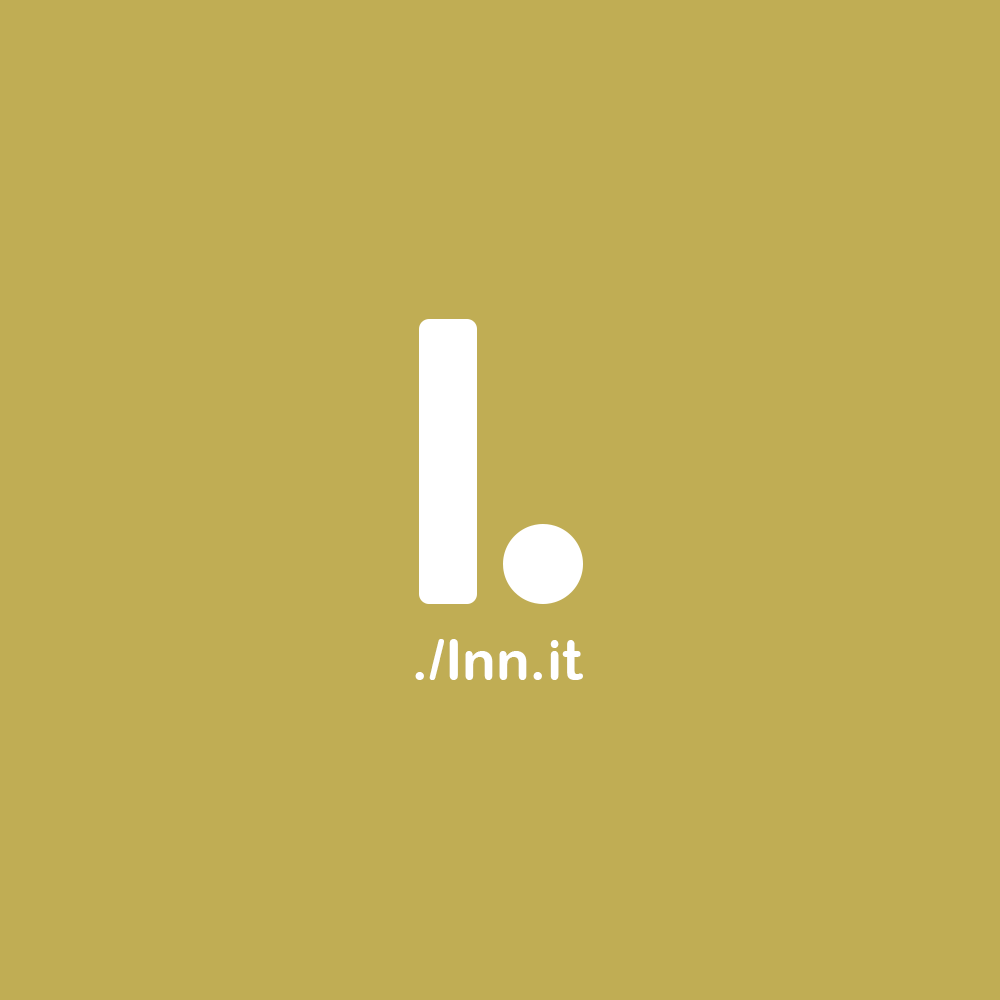
<style>
.page{position:relative;width:1000px;height:1000px;background:#c0ad54}
.page>*{position:absolute;margin:0}
.t1{font:55.7px "ArialRoundedMTBold";color:#ffffff}
</style>
<div class="page">
<p class="t1" style="left:415px;top:639px;width:168px;height:41px">./Inn.it</p>
</div>
